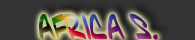
<style>
.page{position:relative;width:195px;height:40px;background:#333333}
.page>*{position:absolute;margin:0}
.t1{font:28.5px "EncoreNorScriptCasedOblique";scale:1.26 1}
</style>
<div class="page">
<p class="t1" style="left:39px;top:13px;width:119px;height:27px">AFRICA S.</p>
</div>
